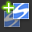
<style>
.page{position:relative;width:32px;height:32px;background:#333333}
.page>*{position:absolute;margin:0}
.t1{font:18px "LucidaBlackletter";color:#ffffff;font-weight:bold}
</style>
<div class="page">
<p class="t1" style="left:3px;top:3px;width:11px;height:10px">+</p>
</div>
